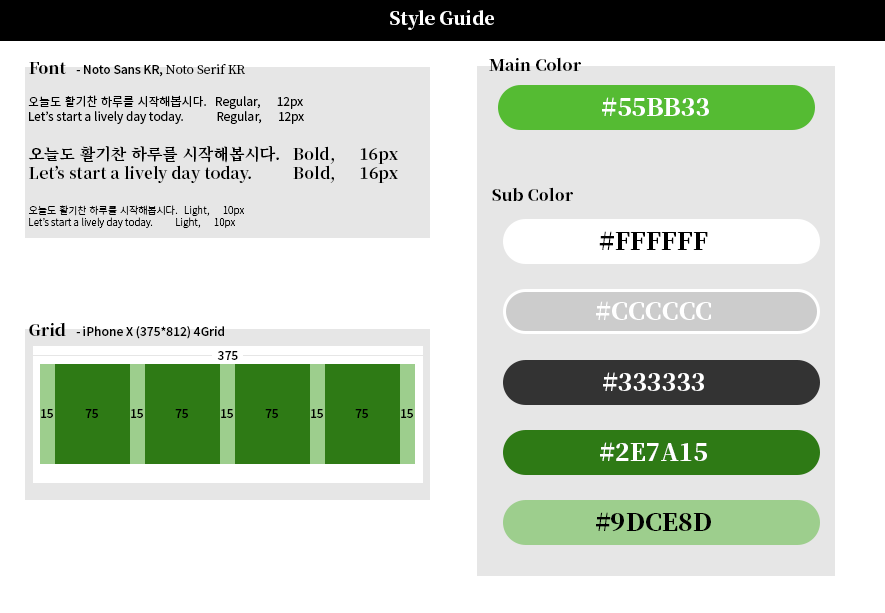
<style>
.page{position:relative;width:885px;height:613px;background:#ffffff}
.page>*{position:absolute;margin:0}
.t1{font:18px "NotoSerifKR-Black";color:#ffffff}
.t2{font:16px "NotoSerifKR-Black";color:#000000}
.t3{font:12px "NotoSansKR-Medium";color:#000000}
.t4{font:12px "NotoSerifKR-Medium";color:#000000}
.t5{font:12px "NotoSansKR-Regular";color:#000000}
.t6{font:24px "NotoSerifKR-Black";color:#ffffff}
.t7{font:16px "NotoSerifKR-Bold";color:#000000}
.t8{font:10px "NotoSansKR-Light";color:#000000}
.t9{font:24px "NotoSerifKR-Black";color:#000000}
</style>
<div class="page">
<p class="t1" style="left:390px;top:10px;width:104px;height:20px">Style Guide</p>
<p class="t2" style="left:29px;top:62px;width:37px;height:12px">Font</p>
<p class="t3" style="left:76px;top:64px;width:169px;height:13px">- Noto Sans KR, <span class="t4">Noto Serif KR</span></p>
<p class="t2" style="left:489px;top:57px;width:92px;height:14px">Main Color</p>
<p class="t5" style="left:28px;top:95px;width:276px;height:29px">오늘도 활기찬 하루를 시작해봅시다.   Regular,      12px<br>Let’s start a lively day today.            Regular,      12px</p>
<p class="t6" style="left:602px;top:97px;width:107px;height:19px">#55BB33</p>
<p class="t7" style="left:28px;top:146px;width:370px;height:37px">오늘도 활기찬 하루를 시작해봅시다.   Bold,      16px<br>Let’s start a lively day today.          Bold,      16px</p>
<p class="t2" style="left:492px;top:187px;width:81px;height:14px">Sub Color</p>
<p class="t8" style="left:29px;top:205px;width:215px;height:23px">오늘도 활기찬 하루를 시작해봅시다.   Light,      10px<br>Let’s start a lively day today.          Light,      10px</p>
<p class="t9" style="left:599px;top:231px;width:109px;height:19px">#FFFFFF</p>
<p class="t6" style="left:596px;top:301px;width:115px;height:19px">#CCCCCC</p>
<p class="t2" style="left:29px;top:322px;width:37px;height:14px">Grid</p>
<p class="t3" style="left:76px;top:326px;width:148px;height:13px">- iPhone X (375*812) 4Grid</p>
<p class="t3" style="left:217px;top:351px;width:21px;height:9px">375</p>
<p class="t6" style="left:603px;top:372px;width:101px;height:19px">#333333</p>
<p class="t3" style="left:41px;top:409px;width:12px;height:9px">15</p>
<p class="t3" style="left:85px;top:409px;width:13px;height:9px">75</p>
<p class="t3" style="left:131px;top:409px;width:12px;height:9px">15</p>
<p class="t3" style="left:175px;top:409px;width:13px;height:9px">75</p>
<p class="t3" style="left:221px;top:409px;width:12px;height:9px">15</p>
<p class="t3" style="left:265px;top:409px;width:13px;height:9px">75</p>
<p class="t3" style="left:311px;top:409px;width:12px;height:9px">15</p>
<p class="t3" style="left:355px;top:409px;width:13px;height:9px">75</p>
<p class="t3" style="left:401px;top:409px;width:12px;height:9px">15</p>
<p class="t6" style="left:600px;top:442px;width:107px;height:19px">#2E7A15</p>
<p class="t9" style="left:596px;top:512px;width:115px;height:20px">#9DCE8D</p>
</div>
